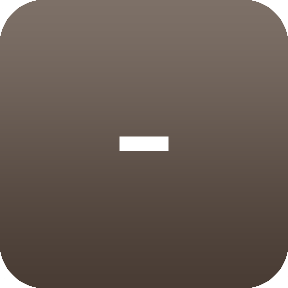
<style>
.page{position:relative;width:288px;height:288px}
.page>*{position:absolute;margin:0}
.t1{font:160px "Verdana";color:#ffffff;text-transform:uppercase}
</style>
<div class="page">
<p class="t1" style="left:119px;top:136px;width:50px;height:15px">-</p>
</div>
